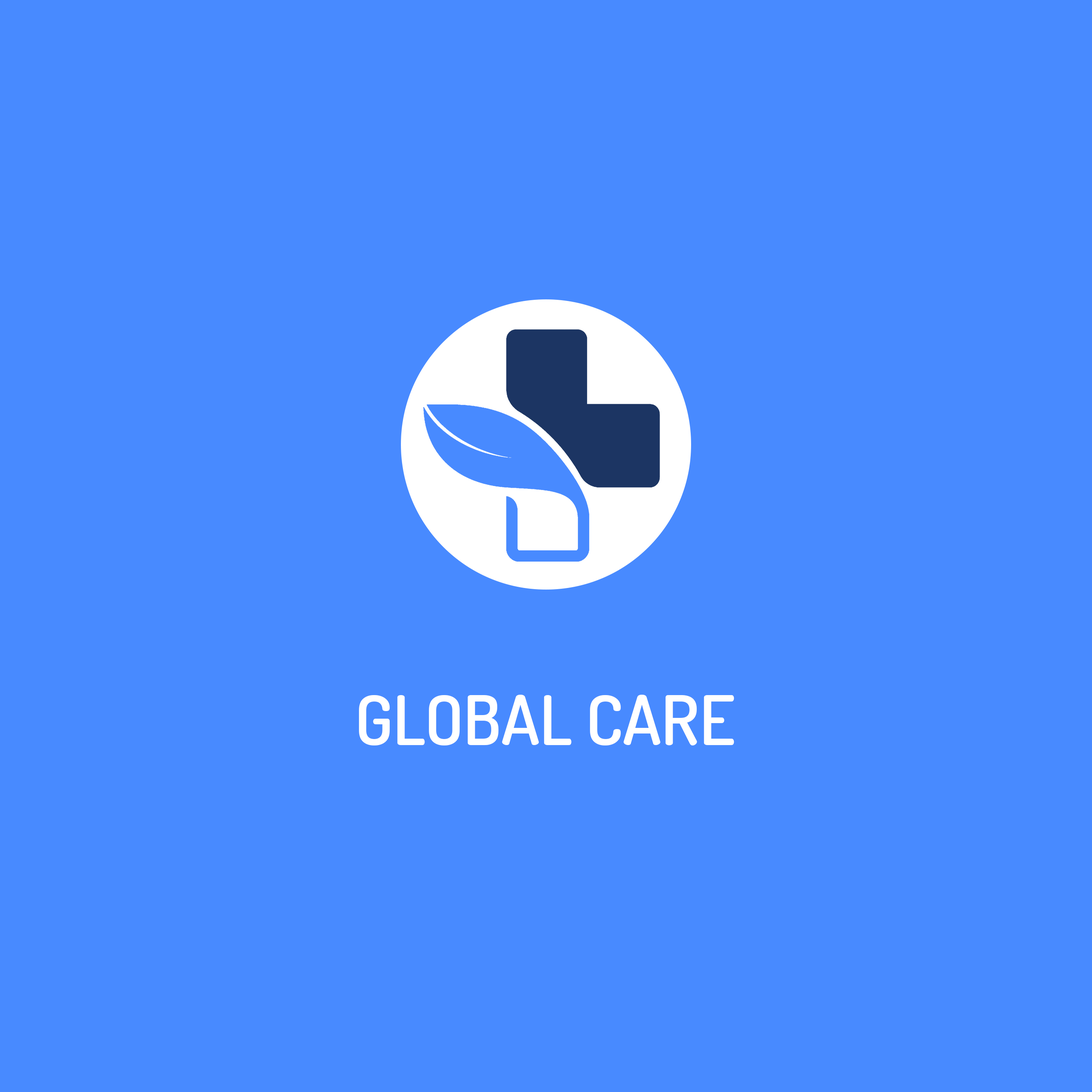
<style>
.page{position:relative;width:1092px;height:1092px;background:#488aff}
.page>*{position:absolute;margin:0}
.t1{font:68.3px "Dosis-SemiBold";color:#ffffff}
</style>
<div class="page">
<p class="t1" style="left:359px;top:695px;width:375px;height:50px">GLOBAL CARE</p>
</div>
